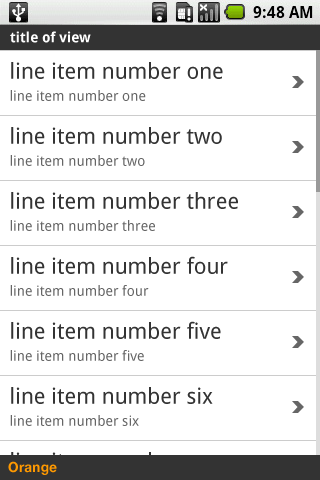
<style>
.page{position:relative;width:320px;height:480px;background:#ffffff}
.page>*{position:absolute;margin:0}
.t1{font:14px "DroidSans-Bold";color:#ffffff}
.t2{font:22px/22px "DroidSans";color:#333333}
.t3{font:14px/22px "DroidSans";color:#666666}
.t4{font:14px "HelveticaNeue-Bold";color:#ff9900}
</style>
<div class="page">
<p class="t1" style="left:10px;top:31px;width:81px;height:12px">title of view</p>
<p class="t2" style="left:10px;top:62px;width:213px;height:39px">line item number one<br><span class="t3">line item number one</span></p>
<p class="t2" style="left:10px;top:127px;width:212px;height:39px">line item number two<br><span class="t3">line item number two</span></p>
<p class="t2" style="left:10px;top:192px;width:228px;height:39px">line item number three<br><span class="t3">line item number three</span></p>
<p class="t2" style="left:10px;top:256px;width:218px;height:40px">line item number four<br><span class="t3">line item number four</span></p>
<p class="t2" style="left:10px;top:321px;width:211px;height:40px">line item number five<br><span class="t3">line item number five</span></p>
<p class="t2" style="left:10px;top:387px;width:203px;height:39px">line item number six<br><span class="t3">line item number six</span></p>
<p class="t4" style="left:8px;top:461px;width:49px;height:14px">Orange</p>
</div>
